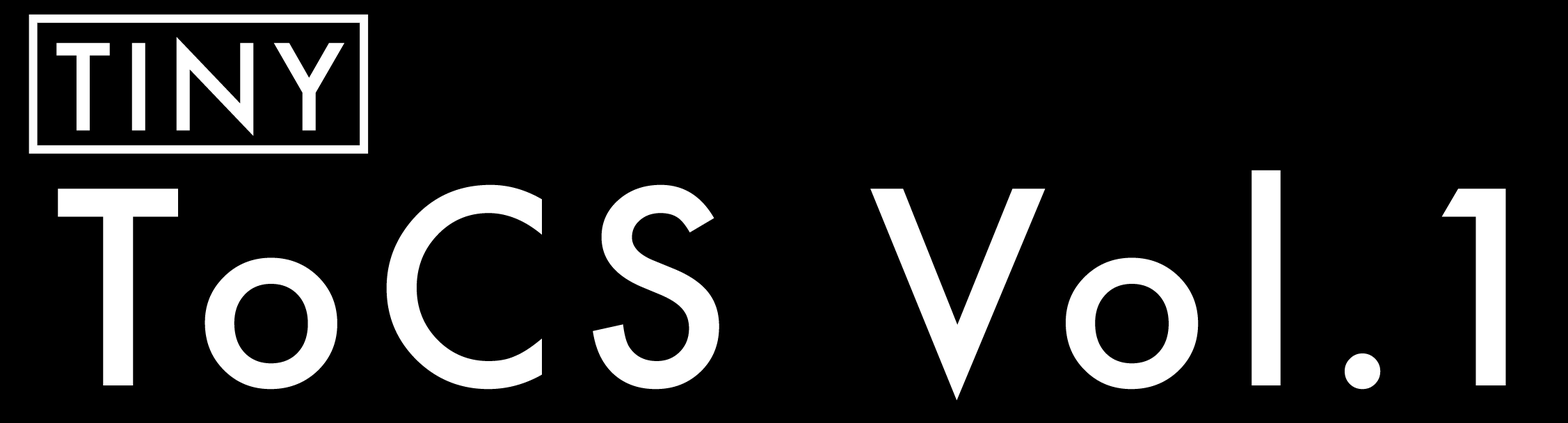
<style>
.page{position:relative;width:1568px;height:423px;background:#000000}
.page>*{position:absolute;margin:0}
.t1{font:115.9px "Futura-Medium";letter-spacing:0.09em;color:#ffffff;text-transform:uppercase}
.t2{font:260.7px "Futura-Medium";letter-spacing:0.09em;color:#ffffff}
.t3{font:260.7px "Futura-Medium";letter-spacing:0.01em;color:#ffffff}
</style>
<div class="page">
<p class="t1" style="left:56px;top:37px;width:663px;height:353px">Tiny<br><span class="t2">ToCS</span></p>
<p class="t2" style="left:870px;top:170px;width:636px;height:231px">Vol<span class="t3">. </span>1</p>
</div>
